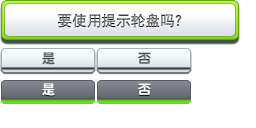
<style>
.page{position:relative;width:256px;height:128px;background:#ffffff}
.page>*{position:absolute;margin:0}
.t1{font:14.7px "DFPHeiW5-GB"}
.t2{font:13.3px "DFPYuanW9"}
.t3{font:13.3px "DFPYuanW9";color:#ffffff}
</style>
<div class="page">
<p class="t1" style="left:58px;top:13px;width:124px;height:15px">要使用提示轮盘吗？</p>
<p class="t2" style="left:42px;top:52px;width:13px;height:13px">是</p>
<p class="t2" style="left:138px;top:52px;width:13px;height:12px">否</p>
<p class="t3" style="left:42px;top:83px;width:13px;height:13px">是</p>
<p class="t3" style="left:138px;top:83px;width:13px;height:12px">否</p>
</div>
